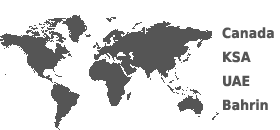
<style>
.page{position:relative;width:280px;height:130px;background:#ffffff}
.page>*{position:absolute;margin:0}
.t1{font:14px/24px "DejaVuSansCondensed-Bold";color:#555555}
</style>
<div class="page">
<p class="t1" style="left:222px;top:27px;width:52px;height:84px;text-align:right">Canada<br>KSA<br>UAE<br>Bahrin</p>
</div>
